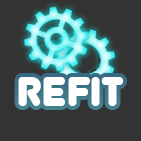
<style>
.page{position:relative;width:141px;height:141px;background:#333333}
.page>*{position:absolute;margin:0}
.t1{font:48px "Junegull";color:#ffffff}
</style>
<div class="page">
<p class="t1" style="left:18px;top:77px;width:106px;height:29px">REFIT</p>
</div>
